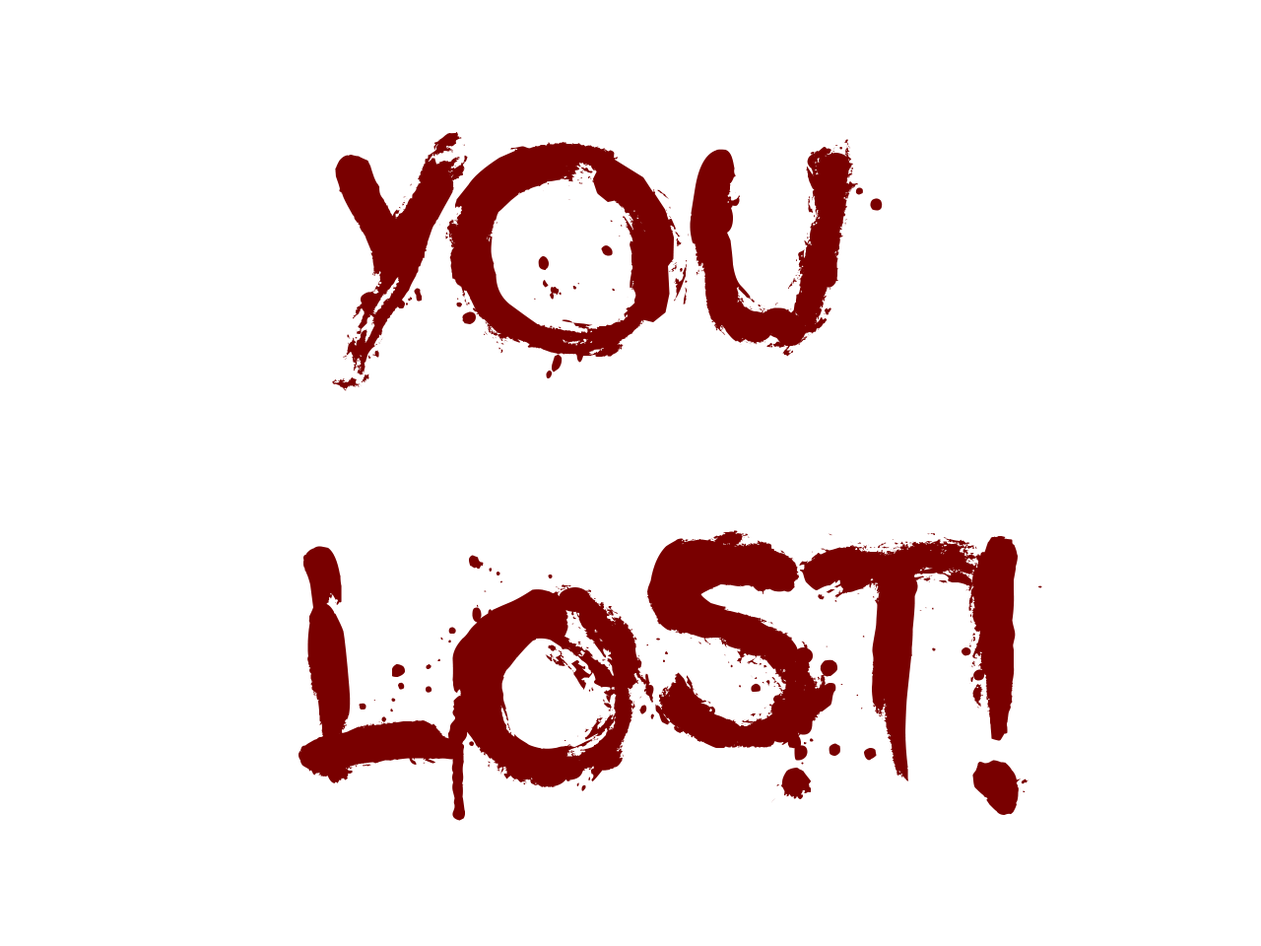
<style>
.page{position:relative;width:1261px;height:946px;background:#ffffff}
.page>*{position:absolute;margin:0}
.t1{font:492.5px/394px "YouMurdererBB";color:#790000}
</style>
<div class="page">
<p class="t1" style="left:298px;top:132px;width:744px;height:689px;text-align:center">YOU <br>lost!</p>
</div>
